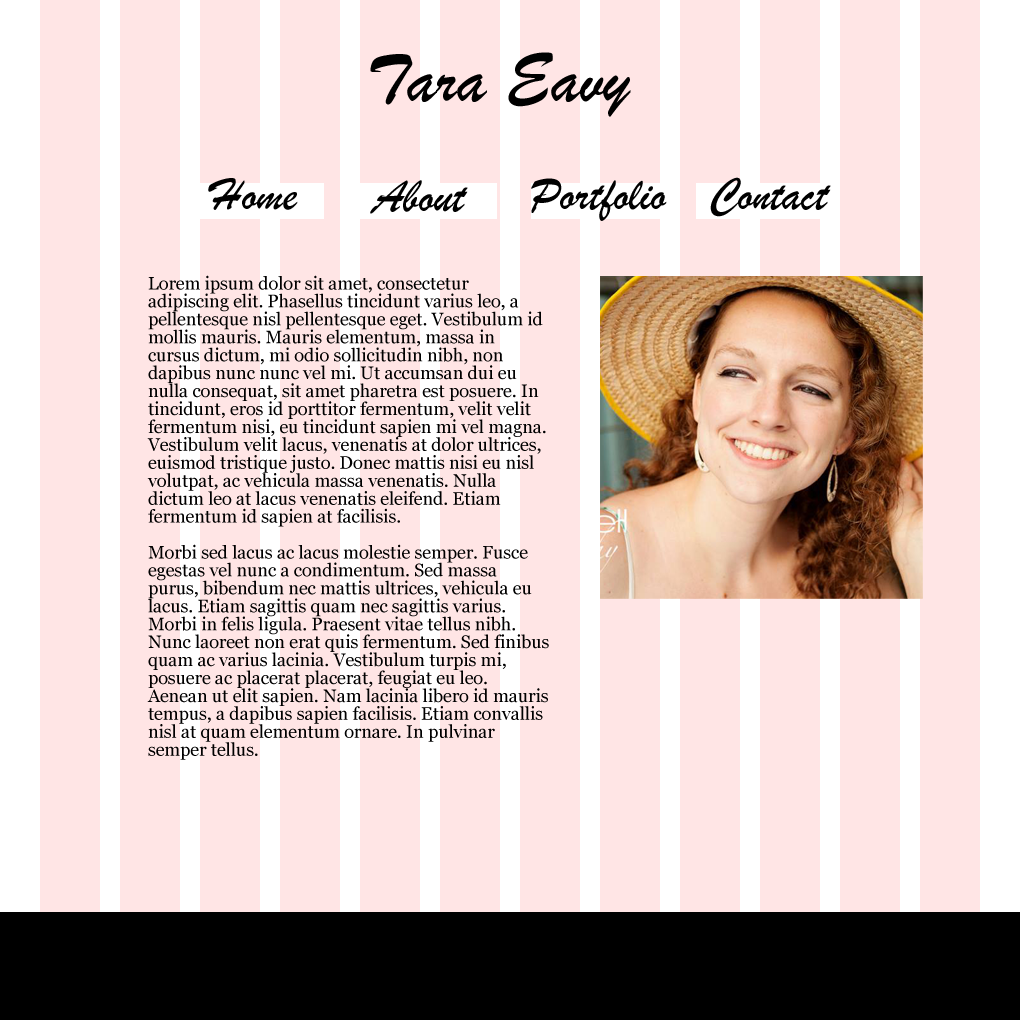
<style>
.page{position:relative;width:1020px;height:1020px;background:#ffe5e5}
.page>*{position:absolute;margin:0}
.t1{font:71.7px "BrushScriptMT";color:#000000}
.t2{font:47.8px "BrushScriptMT";color:#000000}
.t3{font:17.9px/17.9px "Georgia";color:#000000}
</style>
<div class="page">
<p class="t1" style="left:370px;top:52px;width:261px;height:65px">Tara Eavy</p>
<p class="t2" style="left:208px;top:178px;width:90px;height:32px">Home</p>
<p class="t2" style="left:370px;top:180px;width:98px;height:34px">About</p>
<p class="t2" style="left:531px;top:178px;width:136px;height:43px">Portfolio</p>
<p class="t2" style="left:710px;top:177px;width:121px;height:40px">Contact</p>
<p class="t3" style="left:147px;top:275px;width:402px;height:485px">Lorem ipsum dolor sit amet, consectetur adipiscing elit. Phasellus tincidunt varius leo, a pellentesque nisl pellentesque eget. Vestibulum id mollis mauris. Mauris elementum, massa in cursus dictum, mi odio sollicitudin nibh, non dapibus nunc nunc vel mi. Ut accumsan dui eu nulla consequat, sit amet pharetra est posuere. In tincidunt, eros id porttitor fermentum, velit velit fermentum nisi, eu tincidunt sapien mi vel magna. Vestibulum velit lacus, venenatis at dolor ultrices, euismod tristique justo. Donec mattis nisi eu nisl volutpat, ac vehicula massa venenatis. Nulla dictum leo at lacus venenatis eleifend. Etiam fermentum id sapien at facilisis.<br><br>Morbi sed lacus ac lacus molestie semper. Fusce egestas vel nunc a condimentum. Sed massa purus, bibendum nec mattis ultrices, vehicula eu lacus. Etiam sagittis quam nec sagittis varius. Morbi in felis ligula. Praesent vitae tellus nibh. Nunc laoreet non erat quis fermentum. Sed finibus quam ac varius lacinia. Vestibulum turpis mi, posuere ac placerat placerat, feugiat eu leo. Aenean ut elit sapien. Nam lacinia libero id mauris tempus, a dapibus sapien facilisis. Etiam convallis nisl at quam elementum ornare. In pulvinar semper tellus.</p>
</div>
